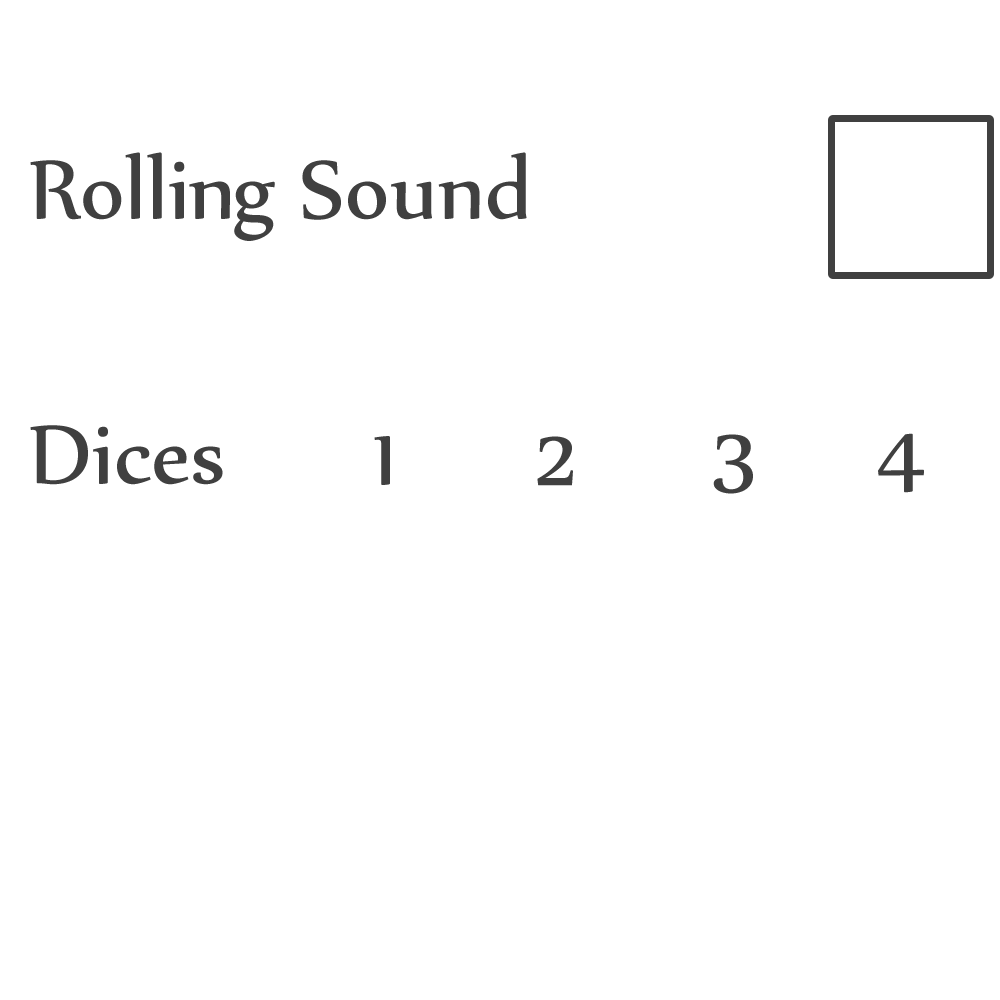
<style>
.page{position:relative;width:1000px;height:1000px;background:#ffffff}
.page>*{position:absolute;margin:0}
.t1{font:100px "Nyala-Regular";color:#404040}
</style>
<div class="page">
<p class="t1" style="left:30px;top:152px;width:497px;height:89px">Rolling Sound</p>
<p class="t1" style="left:30px;top:425px;width:193px;height:60px">Dices</p>
<p class="t1" style="left:374px;top:436px;width:16px;height:49px">1</p>
<p class="t1" style="left:537px;top:436px;width:36px;height:50px">2</p>
<p class="t1" style="left:713px;top:434px;width:40px;height:60px">3</p>
<p class="t1" style="left:878px;top:433px;width:46px;height:60px">4</p>
</div>
